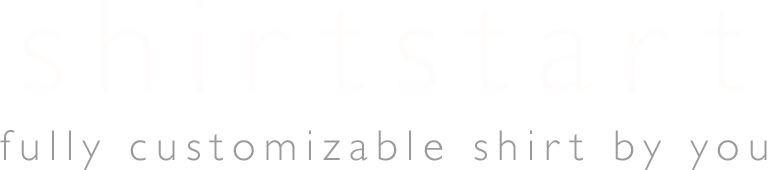
<style>
.page{position:relative;width:778px;height:170px;background:#ffffff}
.page>*{position:absolute;margin:0}
.t1{font:43.4px "GillSans-Light";letter-spacing:0.2em;color:#9a9a9a}
</style>
<div class="page">
<p class="t1" style="left:0px;top:130px;width:767px;height:40px">fully customizable shirt by you</p>
</div>
